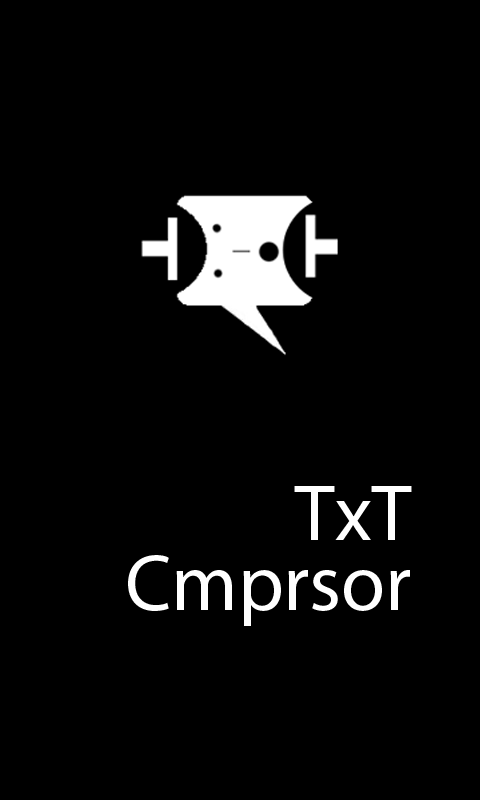
<style>
.page{position:relative;width:480px;height:800px;background:#000000}
.page>*{position:absolute;margin:0}
.t1{font:80px "MyriadPro-Regular";color:#ffffff}
</style>
<div class="page">
<p class="t1" style="left:294px;top:486px;width:118px;height:54px">TxT</p>
<p class="t1" style="left:128px;top:555px;width:282px;height:71px">Cmprsor</p>
</div>
